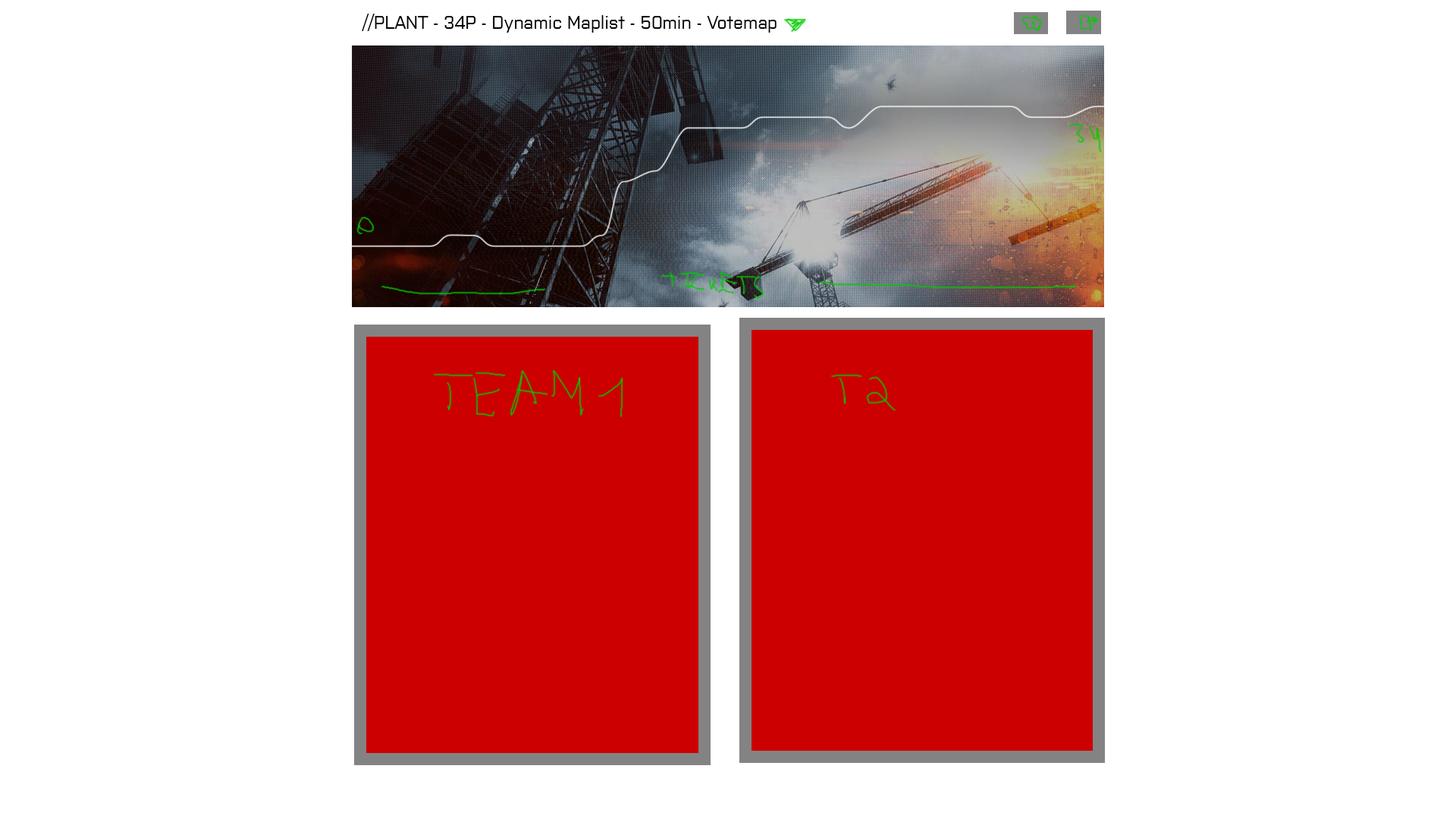
<style>
.page{position:relative;width:1456px;height:819px;background:#ffffff}
.page>*{position:absolute;margin:0}
.t1{font:18.2px "Purista";color:#000000}
</style>
<div class="page">
<p class="t1" style="left:362px;top:14px;width:415px;height:19px">//PLANT - 34P - Dynamic Maplist - 50min - Votemap</p>
</div>
